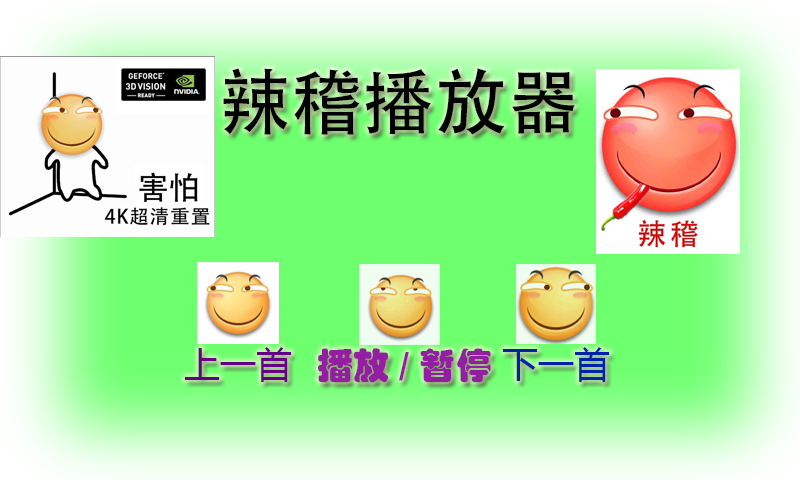
<style>
.page{position:relative;width:800px;height:480px}
.page>*{position:absolute;margin:0}
.t1{font:72px "AdobeHeitiStd-Regular";color:#000000}
.t2{font:36px "MicrosoftYaHei";color:#640085}
.t3{font:36px "STHupo";color:#931ea1}
.t4{font:36px "MicrosoftYaHei";color:#0023a7}
</style>
<div class="page">
<p class="t1" style="left:223px;top:68px;width:352px;height:67px">辣稽播放器</p>
<p class="t2" style="left:184px;top:347px;width:108px;height:35px">上一首</p>
<p class="t3" style="left:318px;top:348px;width:173px;height:35px">播放/暂停</p>
<p class="t4" style="left:502px;top:347px;width:108px;height:35px">下一首</p>
</div>
